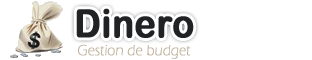
<style>
.page{position:relative;width:312px;height:60px;background:#ffffff}
.page>*{position:absolute;margin:0}
.t1{font:39px "ArialRoundedMTBold";color:#202223;font-weight:bold;scale:0.91 1}
.t2{font:15px "ErasITC-Light";color:#bfb29c;font-weight:bold;scale:0.91 1}
</style>
<div class="page">
<p class="t1" style="left:76px;top:8px;width:118px;height:30px">Dinero</p>
<p class="t2" style="left:78px;top:44px;width:113px;height:15px">Gestion de budget</p>
</div>
